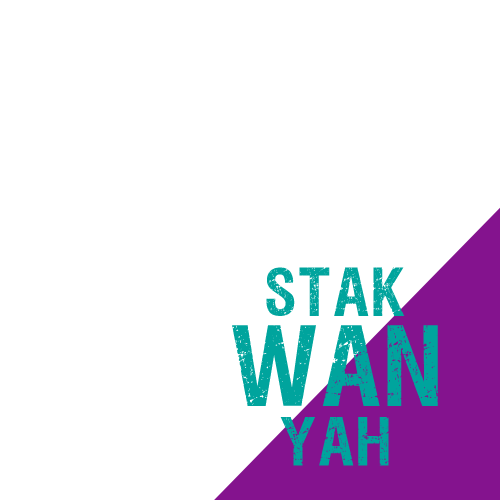
<style>
.page{position:relative;width:500px;height:500px;background:#ffffff}
.page>*{position:absolute;margin:0}
.t1{font:54px "VIPERNORA";letter-spacing:0.06em;color:#00a49d}
.t2{font:89.7px/84.8px "VIPERNORA";letter-spacing:0.06em;color:#00a49d}
</style>
<div class="page">
<p class="t1" style="left:232px;top:267px;width:206px;height:199px;text-align:center">Stak<br><span class="t2">wan<br></span>yah</p>
</div>
